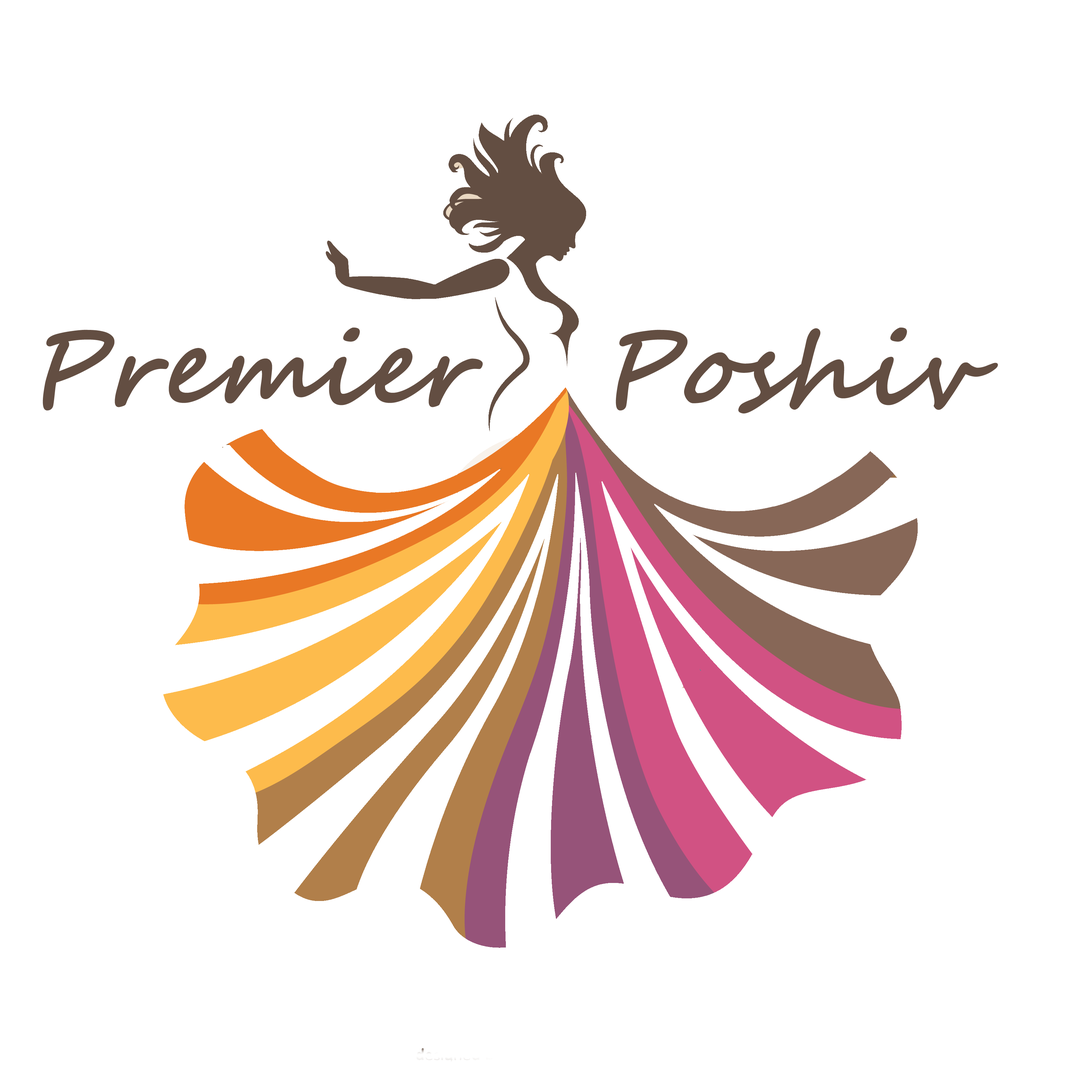
<style>
.page{position:relative;width:1092px;height:1092px;background:#ffffff}
.page>*{position:absolute;margin:0}
.t1{font:98.3px "SegoeScript";color:#634e42;font-weight:bold;font-style:italic}
</style>
<div class="page">
<p class="t1" style="left:43px;top:327px;width:955px;height:86px">Premier   Poshiv</p>
</div>
